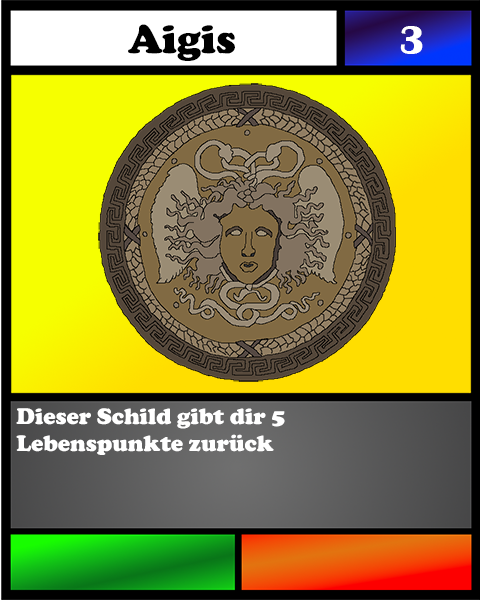
<style>
.page{position:relative;width:480px;height:600px}
.page>*{position:absolute;margin:0}
.t1{font:41.7px "CooperBlack";color:#000000}
.t2{font:41.7px "BritannicBold";color:#ffffff}
.t3{font:23.1px "CooperBlack";color:#ffffff}
</style>
<div class="page">
<p class="t1" style="left:128px;top:24px;width:107px;height:37px">Aigis</p>
<p class="t2" style="left:400px;top:26px;width:23px;height:28px">3</p>
<p class="t3" style="left:16px;top:408px;width:269px;height:47px">Dieser Schild gibt dir 5 Lebenspunkte zurück</p>
</div>
